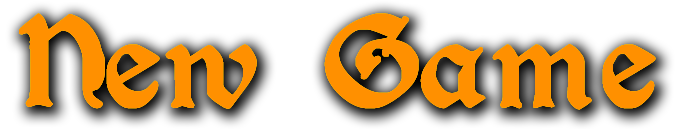
<style>
.page{position:relative;width:680px;height:129px;background:#ffffff}
.page>*{position:absolute;margin:0}
.t1{font:144px "Augusta-Regular";color:#ff9000;font-weight:bold}
</style>
<div class="page">
<p class="t1" style="left:19px;top:13px;width:637px;height:97px">New Game</p>
<p class="t1" style="left:19px;top:13px;width:637px;height:97px">New Game</p>
<p class="t1" style="left:19px;top:13px;width:637px;height:97px">New Game</p>
</div>
